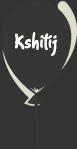
<style>
.page{position:relative;width:77px;height:149px;background:#333333}
.page>*{position:absolute;margin:0}
.t1{font:24.1px "Romy";color:#ffffff;font-weight:bold;scale:0.89 1}
</style>
<div class="page">
<p class="t1" style="left:15px;top:32px;width:42px;height:24px">Kshitij</p>
</div>
